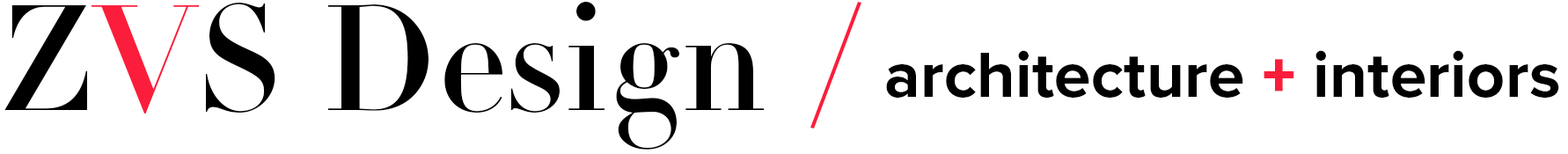
<style>
.page{position:relative;width:1568px;height:154px;background:#ffffff}
.page>*{position:absolute;margin:0}
.t1{font:146.7px "DidotLTPro-Headline";color:#000000}
.t2{font:146.7px "DidotLTPro-Headline";letter-spacing:0.001em;color:#000000}
.t3{font:146.7px "DidotLTPro-Headline";letter-spacing:0.001em;color:#fa1e3c}
.t4{font:176px "DidotLTPro-Bold";color:#fa1e3c}
.t5{font:66px "ProximaNova-Bold";letter-spacing:0.001em;color:#000000}
.t6{font:66px "ProximaNova-Black";color:#fa1e3c}
</style>
<div class="page">
<p class="t1" style="left:4px;top:1px;width:760px;height:149px"><span class="t2">Z</span><span class="t3">V</span><span class="t2">S</span> Design</p>
<p class="t4" style="left:810px;top:2px;width:51px;height:126px">/</p>
<p class="t5" style="left:886px;top:50px;width:673px;height:48px">architecture <span class="t6">+ </span>interiors</p>
</div>
